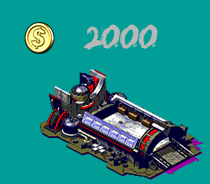
<style>
.page{position:relative;width:210px;height:184px;background:#009e96}
.page>*{position:absolute;margin:0}
.t1{font:29.6px "LeviBrush";color:#b8b8b8;scale:0.96 1}
</style>
<div class="page">
<p class="t1" style="left:83px;top:24px;width:75px;height:26px">2000</p>
</div>
